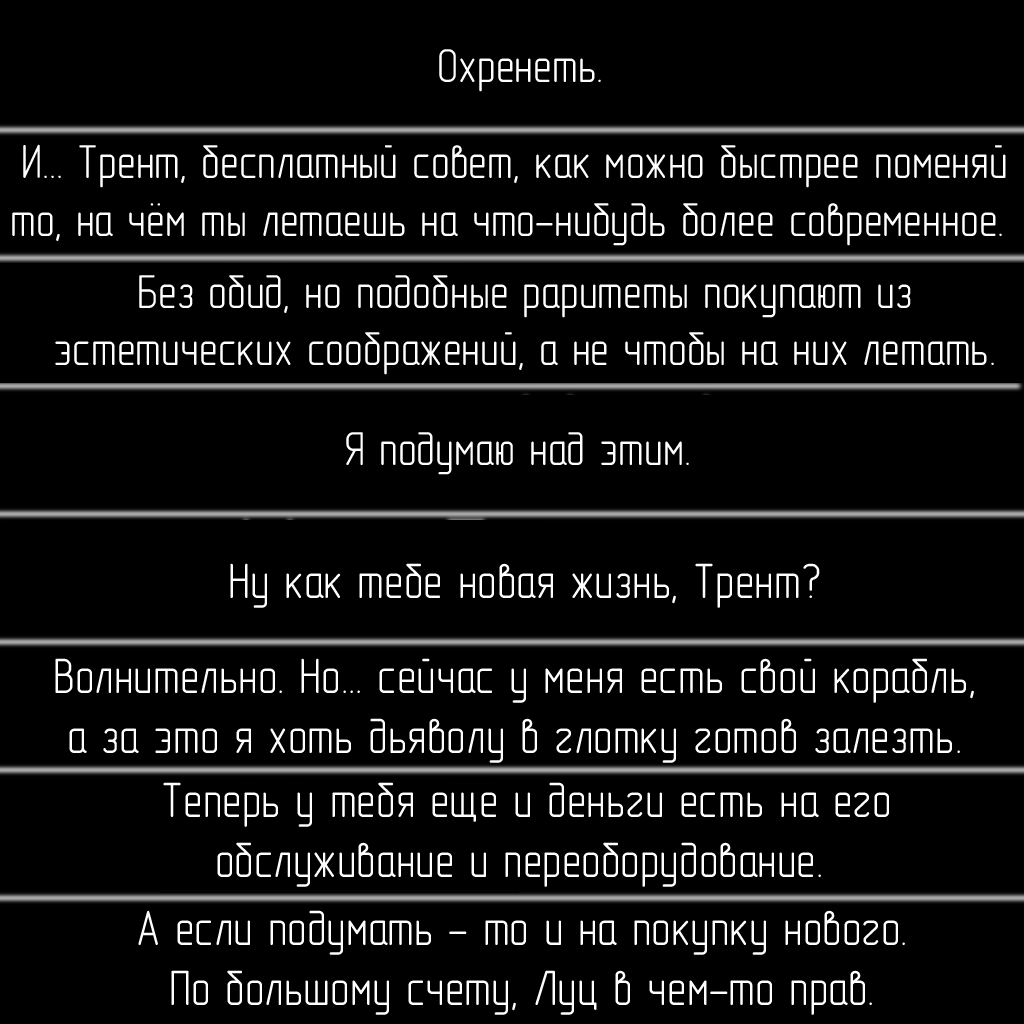
<style>
.page{position:relative;width:1024px;height:1024px;background:#000000}
.page>*{position:absolute;margin:0}
.t1{font:48px "GOST-2.304-81typeA";color:#ffffff}
.t2{font:50px "GOST-2.304-81typeA";color:#ffffff}
</style>
<div class="page">
<p class="t1" style="left:439px;top:49px;width:162px;height:43px">Охренеть.</p>
<p class="t1" style="left:12px;top:144px;width:994px;height:102px;text-align:center">И... Трент, бесплатный совет, как можно быстрее поменяй<br>то, на чём ты летаешь на что-нибудь более современное.</p>
<p class="t1" style="left:55px;top:275px;width:939px;height:100px;text-align:center">Без обид, но подобные раритеты покупают из<br>эстетических соображений, а не чтобы на них летать.</p>
<p class="t1" style="left:346px;top:432px;width:343px;height:43px">Я подумаю над этим.</p>
<p class="t2" style="left:230px;top:563px;width:590px;height:45px">Ну как тебе новая жизнь, Трент?</p>
<p class="t2" style="left:55px;top:658px;width:919px;height:105px;text-align:center">Волнительно. Но... сейчас у меня есть свой корабль,<br>а за это я хоть дьяволу в глотку готов залезть.</p>
<p class="t2" style="left:163px;top:782px;width:726px;height:105px;text-align:center">Теперь у тебя еще и деньги есть на его<br>обслуживание и переоборудование.</p>
<p class="t2" style="left:138px;top:910px;width:767px;height:105px;text-align:center">А если подумать - то и на покупку нового.<br>По большому счету, Луц в чем-то прав.</p>
</div>
